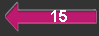
<style>
.page{position:relative;width:99px;height:36px;background:#333333}
.page>*{position:absolute;margin:0}
.t1{font:16px "Arial-BoldMT";color:#ffffff}
</style>
<div class="page">
<p class="t1" style="left:51px;top:10px;width:16px;height:12px">15</p>
</div>
